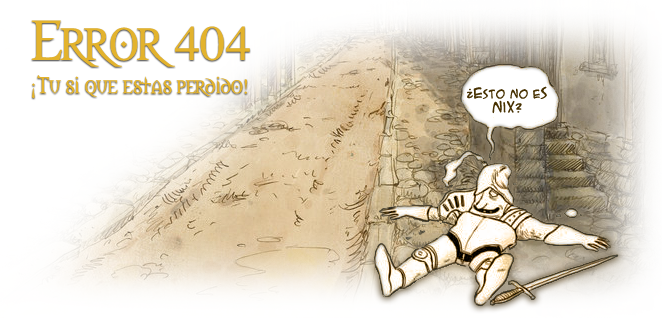
<style>
.page{position:relative;width:662px;height:318px;background:#ffffff}
.page>*{position:absolute;margin:0}
.t1{font:52.4px "Morpheus";color:#e3b32d;scale:1.03 1}
.t2{font:21.3px "Morpheus";color:#e3b32d;scale:1.03 1}
.t3{font:11.1px/14.3px "ACMESecretAgent";color:#473101;scale:1.03 1}
.t4{font:13.9px/14.3px "ACMESecretAgent";color:#473101;scale:1.03 1}
</style>
<div class="page">
<p class="t1" style="left:31px;top:20px;width:219px;height:47px">Error 404</p>
<p class="t2" style="left:32px;top:75px;width:215px;height:24px">¡Tu si que estas perdido!</p>
<p class="t3" style="left:467px;top:86px;width:80px;height:28px;text-align:center">¿<span class="t4">E</span>sto no e<span class="t4">s<br>nix</span>?</p>
</div>
